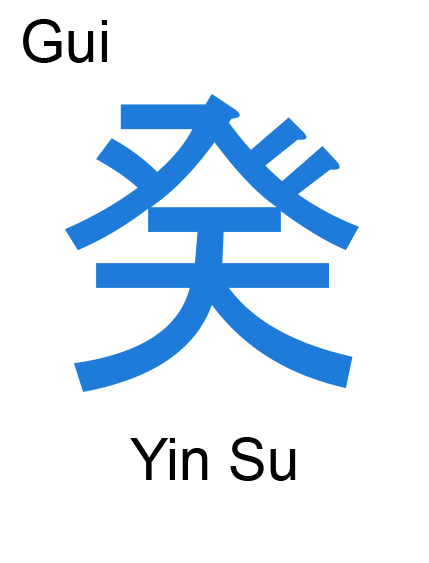
<style>
.page{position:relative;width:429px;height:563px;background:#ffffff}
.page>*{position:absolute;margin:0}
.t1{font:58.3px "ArialMT";color:#000000}
.t2{font:333.3px "MS-Gothic";color:#1e7bda}
</style>
<div class="page">
<p class="t1" style="left:23px;top:19px;width:84px;height:44px">Gui</p>
<p class="t2" style="left:64px;top:94px;width:295px;height:298px">癸</p>
<p class="t1" style="left:130px;top:437px;width:166px;height:44px">Yin Su</p>
</div>
